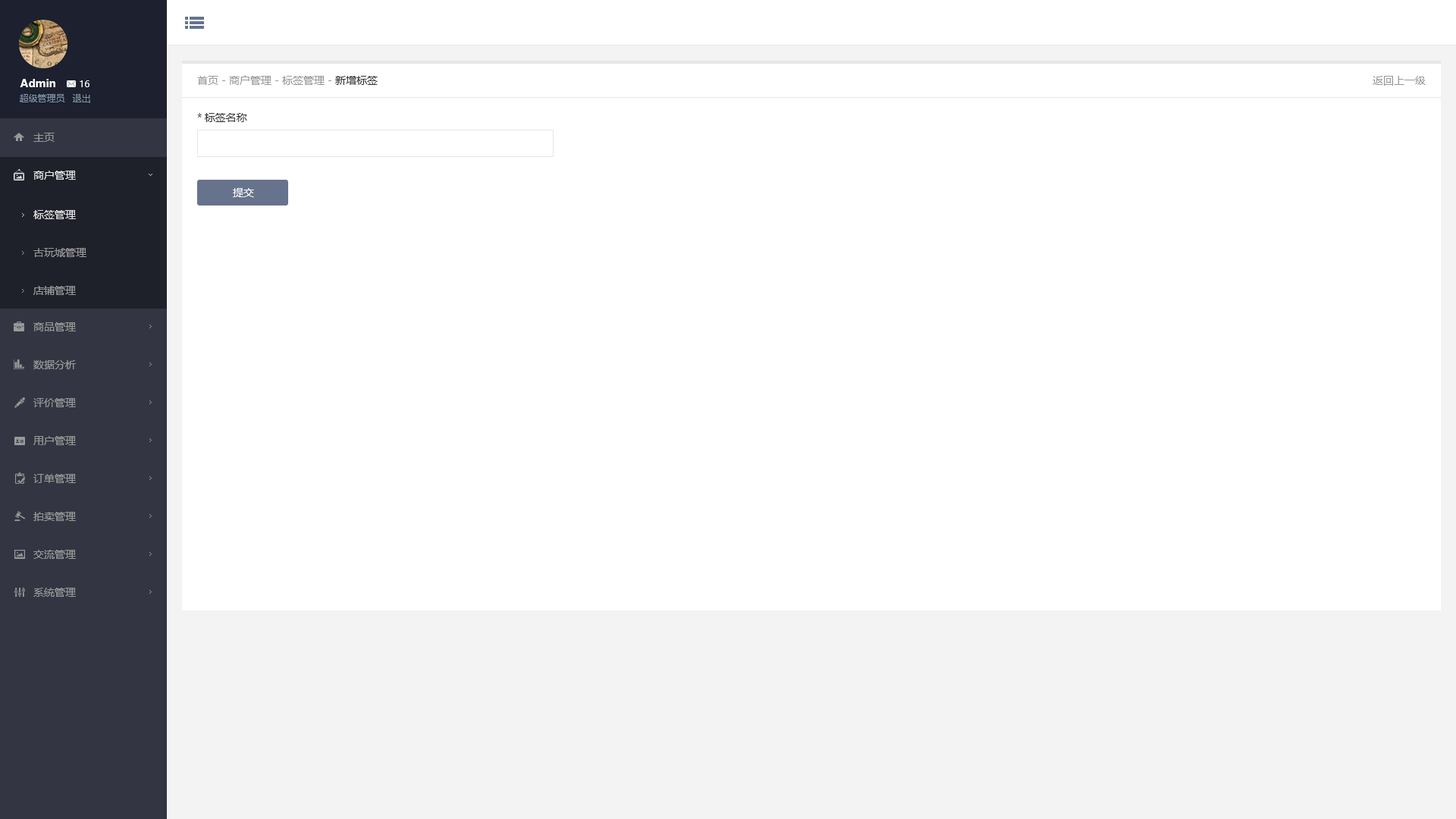
<style>
.page{position:relative;width:1456px;height:819px;background:#ffffff}
.page>*{position:absolute;margin:0}
.t1{font:10.6px "MicrosoftYaHei";color:#999999}
.t2{font:10.6px "MicrosoftYaHei";color:#333333}
.t3{font:10.6px "MicrosoftYaHei-Bold";color:#ffffff}
.t4{font:9.1px "MicrosoftYaHei";color:#ffffff}
.t5{font:9.1px "MicrosoftYaHei";color:#8095a8}
.t6{font:10.6px/37.9px "MicrosoftYaHei";color:#999999}
.t7{font:10.6px/37.9px "MicrosoftYaHei";color:#e6e6e6}
.t8{font:10.6px "MicrosoftYaHei";color:#ffffff}
</style>
<div class="page">
<p class="t1" style="left:197px;top:75px;width:181px;height:10px">首页 - 商户管理 - 标签管理 - <span class="t2">新增标签</span></p>
<p class="t1" style="left:1373px;top:76px;width:53px;height:10px">返回上一级</p>
<p class="t3" style="left:20px;top:79px;width:35px;height:8px">Admin</p>
<p class="t4" style="left:80px;top:80px;width:9px;height:7px">16</p>
<p class="t5" style="left:20px;top:94px;width:45px;height:8px">超级管理员</p>
<p class="t5" style="left:72px;top:94px;width:18px;height:9px">退出</p>
<p class="t2" style="left:197px;top:113px;width:50px;height:9px">*标签名称</p>
<p class="t6" style="left:33px;top:133px;width:43px;height:464px">主页<br><span class="t7">商户管理<br><br><br><br></span>商品管理<br>数据分析<br>评价管理<br>用户管理<br>订单管理<br>拍卖管理<br>交流管理<br>系统管理</p>
<p class="t8" style="left:233px;top:188px;width:21px;height:9px">提交</p>
<p class="t6" style="left:33px;top:210px;width:53px;height:85px"><span class="t7">标签管理<br></span>古玩城管理<br>店铺管理</p>
</div>
